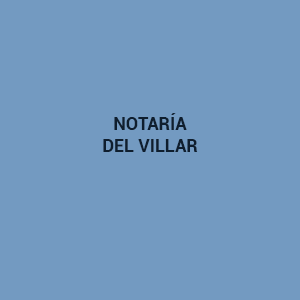
<style>
.page{position:relative;width:300px;height:300px;background:#739ac1}
.page>*{position:absolute;margin:0}
.t1{font:18px "Roboto-Bold";letter-spacing:-0.005em;color:#0f1e2e}
</style>
<div class="page">
<p class="t1" style="left:103px;top:113px;width:95px;height:39px;text-align:center">NOTARÍA<br>DEL VILLAR</p>
</div>
